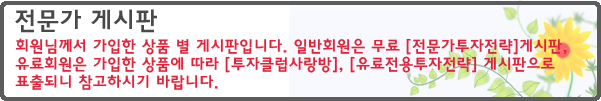
<style>
.page{position:relative;width:601px;height:101px;background:#ffffff}
.page>*{position:absolute;margin:0}
.t1{font:25px "HaanYGodic24";color:#494949}
.t2{font:16px/18px "HaanYGodic24";color:#e0253b}
</style>
<div class="page">
<p class="t1" style="left:15px;top:9px;width:142px;height:24px">전문가 게시판</p>
<p class="t2" style="left:15px;top:38px;width:552px;height:52px">회원님께서 가입한 상품 별 게시판입니다. 일반회원은 무료 [전문가투자전략]게시판, 유료회원은 가입한 상품에 따라 [투자클럽사랑방], [유료전용투자전략] 게시판으로 표출되니 참고하시기 바랍니다.</p>
</div>
